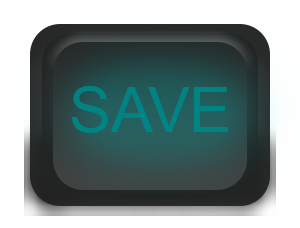
<style>
.page{position:relative;width:300px;height:228px;background:#ffffff}
.page>*{position:absolute;margin:0}
.t1{font:63.3px "ArialMT";color:#008483}
</style>
<div class="page">
<p class="t1" style="left:71px;top:86px;width:157px;height:47px">SAVE</p>
</div>
